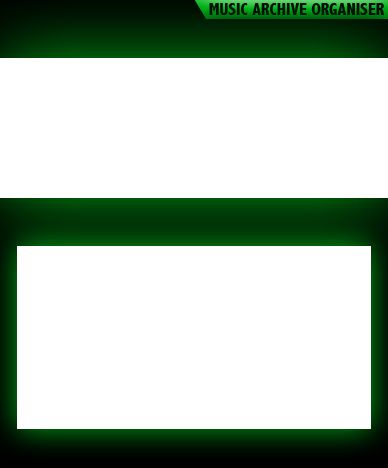
<style>
.page{position:relative;width:388px;height:468px;background:#ffffff}
.page>*{position:absolute;margin:0}
.t1{font:17px "AbadiMT-CondensedExtraBold";color:#001002}
</style>
<div class="page">
<p class="t1" style="left:209px;top:3px;width:175px;height:12px">MUSIC ARCHIVE ORGANISER</p>
</div>
